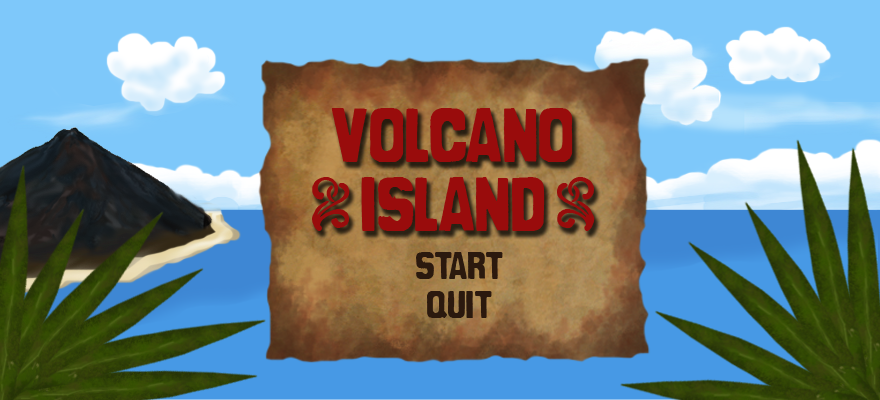
<style>
.page{position:relative;width:880px;height:400px}
.page>*{position:absolute;margin:0}
.t1{font:67px "CanCandeBois";color:#990c0c}
.t2{font:34px "CanCandeBois";color:#2b190e}
</style>
<div class="page">
<p class="t1" style="left:331px;top:108px;width:242px;height:54px">Vvolcano</p>
<p class="t1" style="left:312px;top:177px;width:283px;height:54px">I island H</p>
<p class="t2" style="left:416px;top:252px;width:87px;height:27px">start</p>
<p class="t2" style="left:427px;top:291px;width:65px;height:27px">Qquit</p>
</div>
